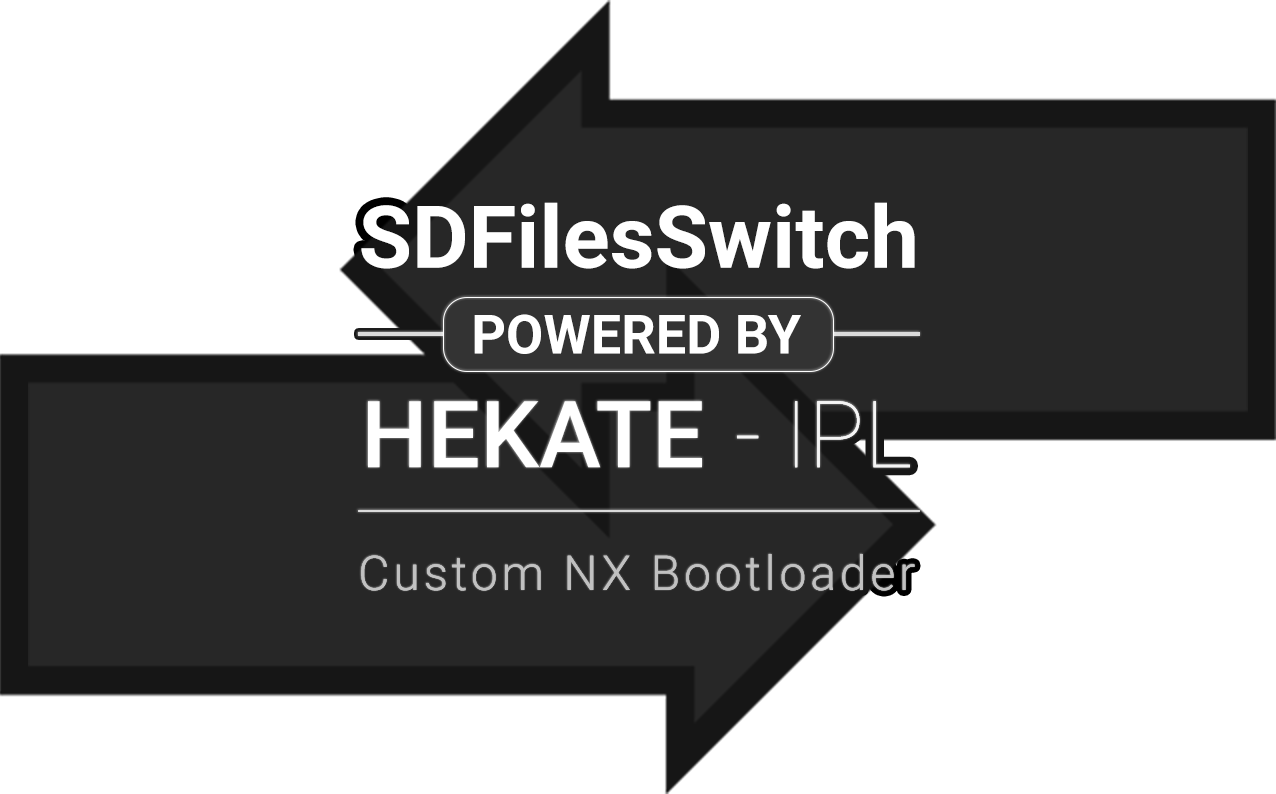
<style>
.page{position:relative;width:1276px;height:794px;background:#ffffff}
.page>*{position:absolute;margin:0}
.t1{font:86.8px "Roboto-Bold";color:#ffffff}
.t2{font:53.9px "Roboto-Bold";color:#ffffff}
.t3{font:92.8px "Roboto-Medium";color:#ffffff}
.t4{font:92.8px "Roboto-Thin";color:#f5f5f5}
.t5{font:47.9px "Roboto-Light";letter-spacing:0.08em;color:#c1c1c1}
</style>
<div class="page">
<p class="t1" style="left:361px;top:202px;width:554px;height:67px">SDFilesSwitch</p>
<p class="t2" style="left:474px;top:314px;width:327px;height:40px">POWERED BY</p>
<p class="t3" style="left:368px;top:401px;width:334px;height:67px">HEKATE</p>
<p class="t4" style="left:737px;top:401px;width:173px;height:67px">- IPL</p>
<p class="t4" style="left:737px;top:401px;width:173px;height:67px">- IPL</p>
<p class="t5" style="left:361px;top:554px;width:554px;height:37px">Custom NX Bootloader</p>
<p class="t5" style="left:361px;top:554px;width:554px;height:37px;opacity:0.95">Custom NX Bootloader</p>
</div>
